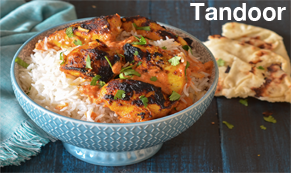
<style>
.page{position:relative;width:291px;height:173px}
.page>*{position:absolute;margin:0}
.t1{font:24px "HelveticaNeue-Bold";color:#ffffff}
</style>
<div class="page">
<p class="t1" style="left:190px;top:3px;width:96px;height:18px">Tandoor</p>
</div>
